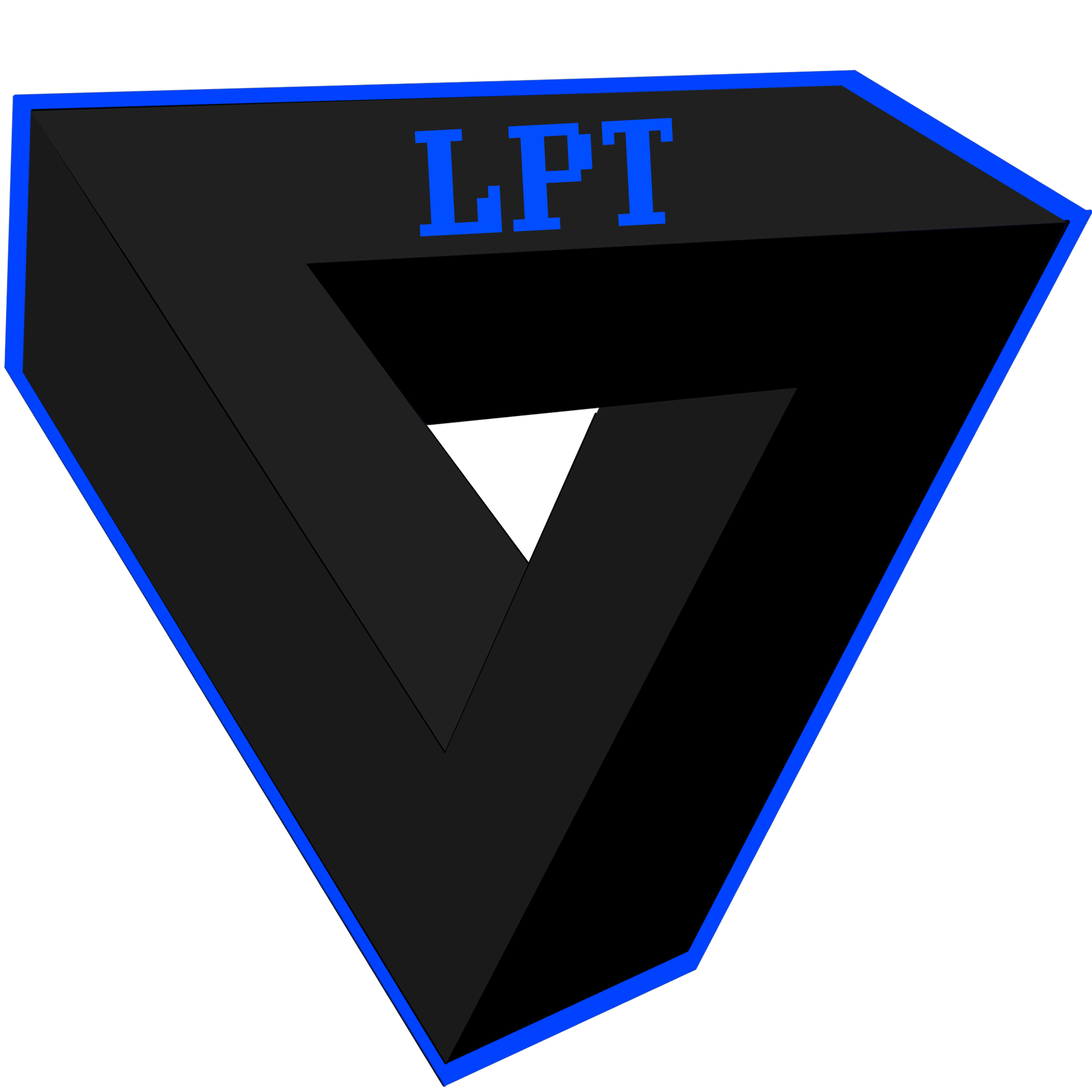
<style>
.page{position:relative;width:1092px;height:1092px;background:#ffffff}
.page>*{position:absolute;margin:0}
.t1{font:186.8px "Windows-Command-Prompt";color:#004eff}
</style>
<div class="page">
<p class="t1" style="left:414px;top:118px;width:259px;height:118px;rotate:-3deg">LPT</p>
</div>
